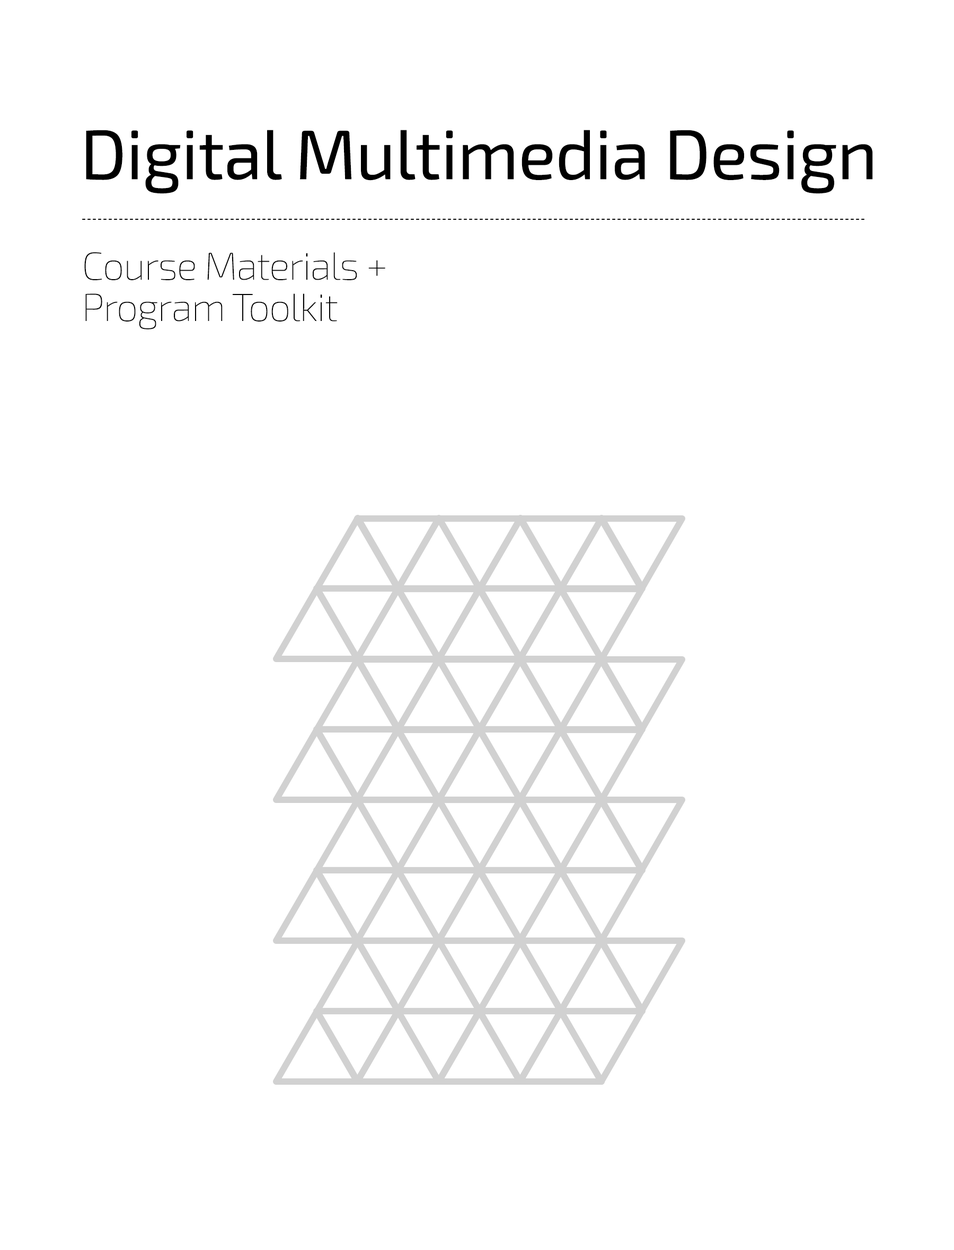
<style>
.page{position:relative;width:954px;height:1250px;background:#ffffff}
.page>*{position:absolute;margin:0}
.t1{font:70.1px "Exo2-Regular";letter-spacing:-0.01em;color:#000000}
.t2{font:39px/41.3px "Exo2-Thin";letter-spacing:-0.025em;color:#000000}
</style>
<div class="page">
<p class="t1" style="left:86px;top:130px;width:787px;height:64px">Digital Multimedia Design</p>
<p class="t2" style="left:84px;top:252px;width:301px;height:78px">Course Materials +<br>Program Toolkit</p>
</div>
